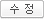
<style>
.page{position:relative;width:44px;height:19px}
.page>*{position:absolute;margin:0}
.t1{font:12px "morris9";color:#4f4f4f}
</style>
<div class="page">
<p class="t1" style="left:10px;top:4px;width:23px;height:10px">수 정</p>
</div>
